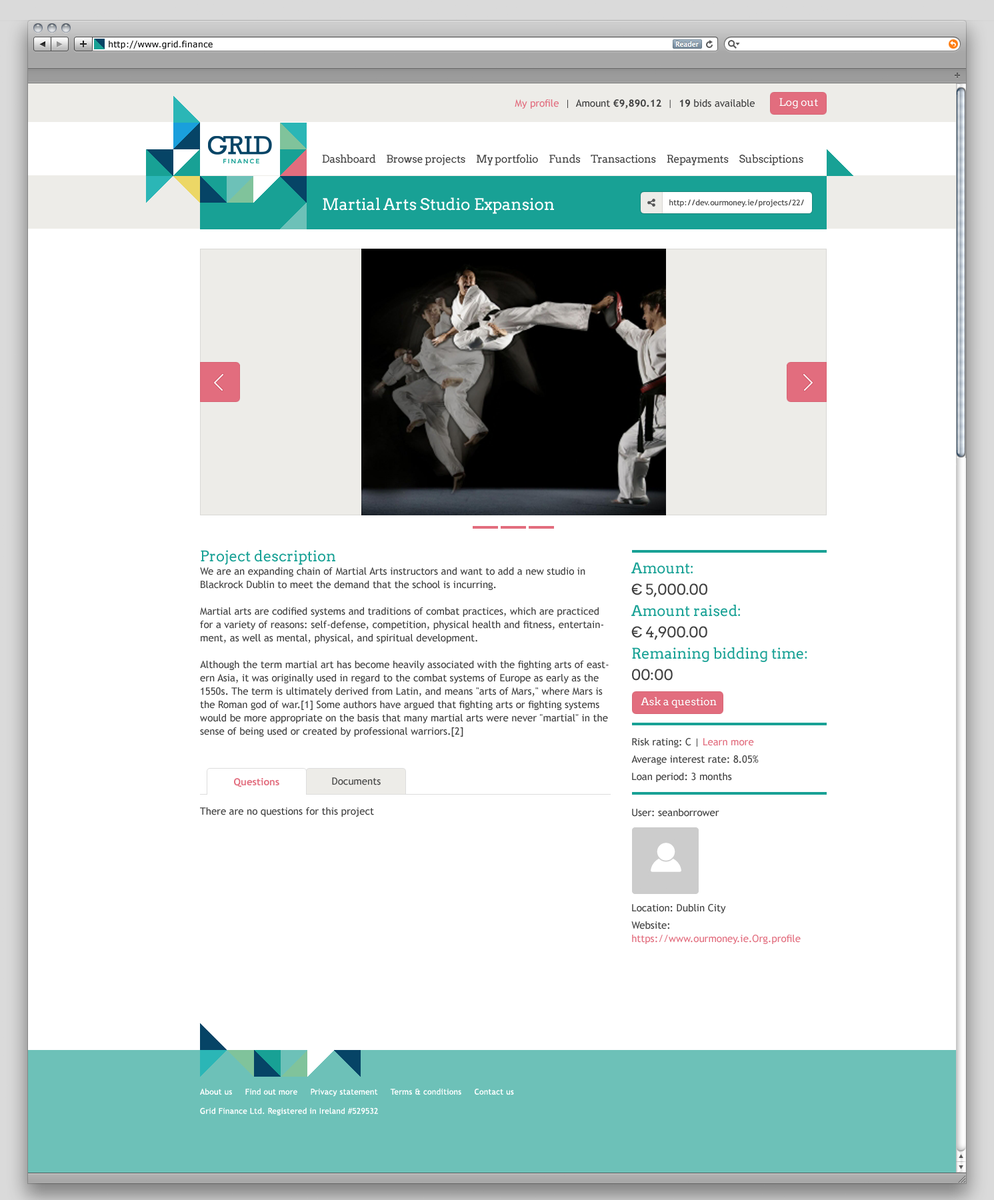
<style>
.page{position:relative;width:994px;height:1200px;background:#ffffff}
.page>*{position:absolute;margin:0}
.t1{font:8.7px "Verdana";color:#000000}
.t2{font:10px "TrebuchetMS";color:#414141}
.t3{font:10px "TrebuchetMS";color:#e26d7e}
.t4{font:10px "TrebuchetMS-Bold";color:#414141}
.t5{font:10.7px "Arvo";color:#ffffff}
.t6{font:10.7px "Arvo";letter-spacing:-0.02em;color:#414141}
.t7{font:16px "Arvo";color:#ffffff}
.t8{font:8px "TrebuchetMS";color:#414141}
.t9{font:10px/13.3px "TrebuchetMS";color:#414141}
.t10{font:14.7px/13.3px "Arvo";color:#18a195}
.t11{font:14.7px/21.3px "Arvo";color:#18a195}
.t12{font:14.7px/21.3px "Arvo";color:#414141}
.t13{font:10px/8.7px "TrebuchetMS";color:#414141}
.t14{font:10px/8.7px "TrebuchetMS";color:#e26d7e}
.t15{font:10px "TrebuchetMS-Bold";color:#e26d7e}
.t16{font:10px "TrebuchetMS";color:#464646}
.t17{font:10px/13.3px "TrebuchetMS";color:#e26d7e}
.t18{font:8px "TrebuchetMS";letter-spacing:0.02em;color:#ffffff}
</style>
<div class="page">
<p class="t1" style="left:109px;top:41px;width:104px;height:8px">http://www.grid.finance</p>
<p class="t2" style="left:515px;top:99px;width:240px;height:10px"><span class="t3">My profile</span>  |  Amount <span class="t4">€9,890.12</span>  |  <span class="t4">19</span> bids available</p>
<p class="t5" style="left:779px;top:98px;width:39px;height:11px">Log out</p>
<p class="t6" style="left:322px;top:154px;width:481px;height:11px">Dashboard     Browse projects     My portfolio     Funds     Transactions     Repayments     Subsciptions</p>
<p class="t7" style="left:323px;top:197px;width:231px;height:17px">Martial Arts Studio Expansion</p>
<p class="t8" style="left:669px;top:199px;width:135px;height:8px">http://dev.ourmoney.ie/projects/22/</p>
<p class="t9" style="left:200px;top:550px;width:409px;height:267px"><span class="t10">Project description<br></span>We are an expanding chain of Martial Arts instructors and want to add a new studio in Blackrock Dublin to meet the demand that the school is incurring.<br><br>Martial arts are codified systems and traditions of combat practices, which are practiced for a variety of reasons: self-defense, competition, physical health and fitness, entertainment, as well as mental, physical, and spiritual development.<br><br>Although the term martial art has become heavily associated with the fighting arts of eastern Asia, it was originally used in regard to the combat systems of Europe as early as the 1550s. The term is ultimately derived from Latin, and means "arts of Mars," where Mars is the Roman god of war.[1] Some authors have argued that fighting arts or fighting systems would be more appropriate on the basis that many martial arts were never "martial" in the sense of being used or created by professional warriors.[2]<br><br><br><br><br><br>There are no questions for this project</p>
<p class="t11" style="left:631px;top:562px;width:176px;height:119px">Amount:<br><span class="t12">€ 5,000.00<br></span>Amount raised:<br><span class="t12">€ 4,900.00<br></span>Remaining bidding time:<br><span class="t12">00:00</span></p>
<p class="t5" style="left:641px;top:697px;width:76px;height:11px">Ask a question</p>
<p class="t13" style="left:631px;top:738px;width:128px;height:44px">Risk rating: C | <span class="t14">Learn more<br></span><br>Average interest rate: 8.05%<br><br>Loan period: 3 months</p>
<p class="t15" style="left:234px;top:778px;width:45px;height:9px">Questions</p>
<p class="t16" style="left:332px;top:777px;width:49px;height:8px">Documents</p>
<p class="t13" style="left:631px;top:809px;width:170px;height:135px">User: seanborrower<br><br><br><br><br><br><br><br><br><br><br>Location: Dublin City<br><br>Website: <br><span class="t17">https://www.ourmoney.ie.Org.profile</span></p>
<p class="t18" style="left:200px;top:1088px;width:314px;height:28px">About us     Find out more     Privacy statement     Terms &amp; conditions     Contact us<br><br>Grid Finance Ltd. Registered in Ireland #529532</p>
</div>
